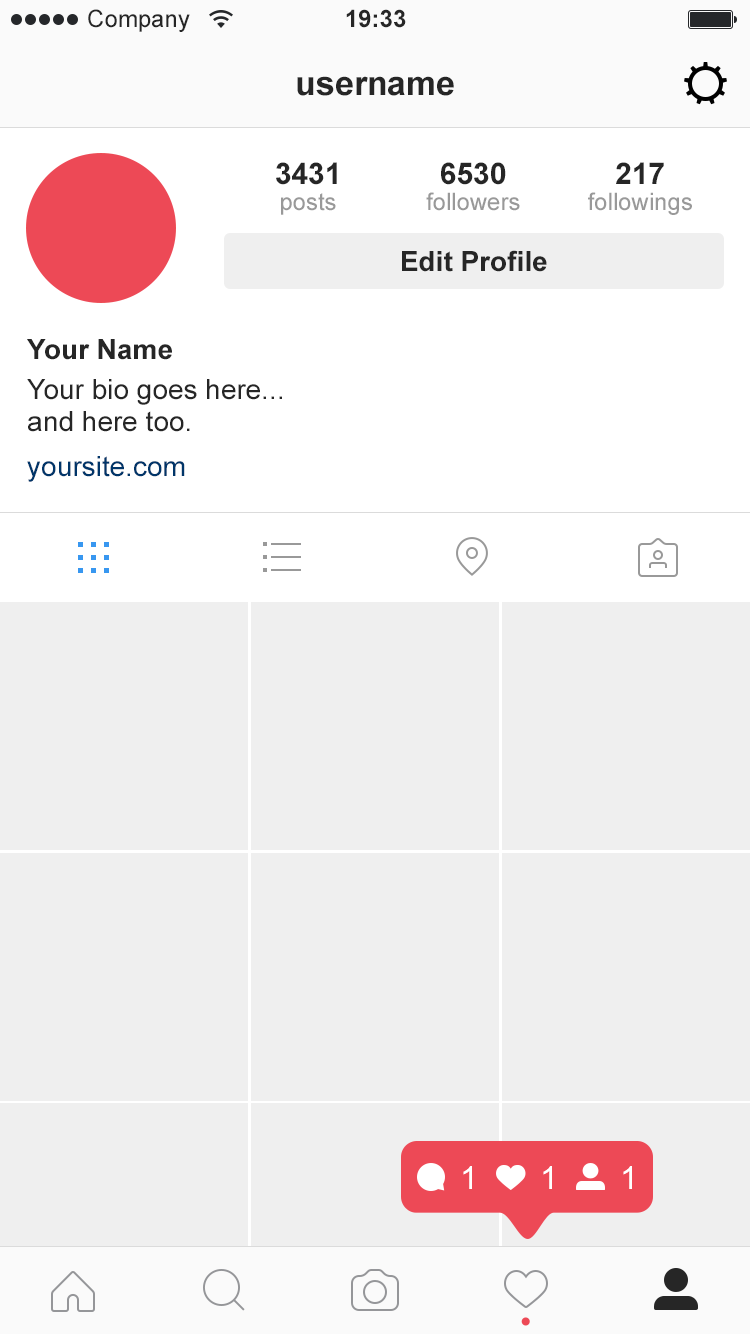
<style>
.page{position:relative;width:750px;height:1334px;background:#efefef}
.page>*{position:absolute;margin:0}
.t1{font:24px "ArialMT";color:#262626}
.t2{font:24px "Arial-BoldMT";color:#262626}
.t3{font:34px "Arial-BoldMT";letter-spacing:-0.005em;color:#262626}
.t4{font:30px "Arial-BoldMT";color:#262626}
.t5{font:24px "ArialMT";color:#999999}
.t6{font:28px "Arial-BoldMT";color:#262626}
.t7{font:28px/32px "ArialMT";color:#262626}
.t8{font:28px "ArialMT";color:#003569}
.t9{font:32px "ArialMT";color:#ffffff}
</style>
<div class="page">
<p class="t1" style="left:88px;top:9px;width:102px;height:23px">Company</p>
<p class="t2" style="left:346px;top:9px;width:60px;height:19px">19:33</p>
<p class="t3" style="left:297px;top:76px;width:157px;height:20px">username</p>
<p class="t4" style="left:276px;top:162px;width:61px;height:23px">3431</p>
<p class="t4" style="left:441px;top:162px;width:65px;height:23px">6530</p>
<p class="t4" style="left:616px;top:162px;width:48px;height:22px">217</p>
<p class="t5" style="left:281px;top:193px;width:55px;height:22px">posts</p>
<p class="t5" style="left:426px;top:192px;width:94px;height:19px">followers</p>
<p class="t5" style="left:588px;top:192px;width:104px;height:23px">followings</p>
<p class="t6" style="left:402px;top:250px;width:145px;height:22px">Edit Profile</p>
<p class="t6" style="left:27px;top:339px;width:145px;height:21px">Your Name</p>
<p class="t7" style="left:27px;top:379px;width:255px;height:53px">Your bio goes here...<br>and here too.</p>
<p class="t8" style="left:27px;top:456px;width:158px;height:26px">yoursite.com</p>
<p class="t9" style="left:463px;top:1166px;width:9px;height:23px">1</p>
<p class="t9" style="left:543px;top:1166px;width:9px;height:23px">1</p>
<p class="t9" style="left:623px;top:1166px;width:9px;height:23px">1</p>
</div>
